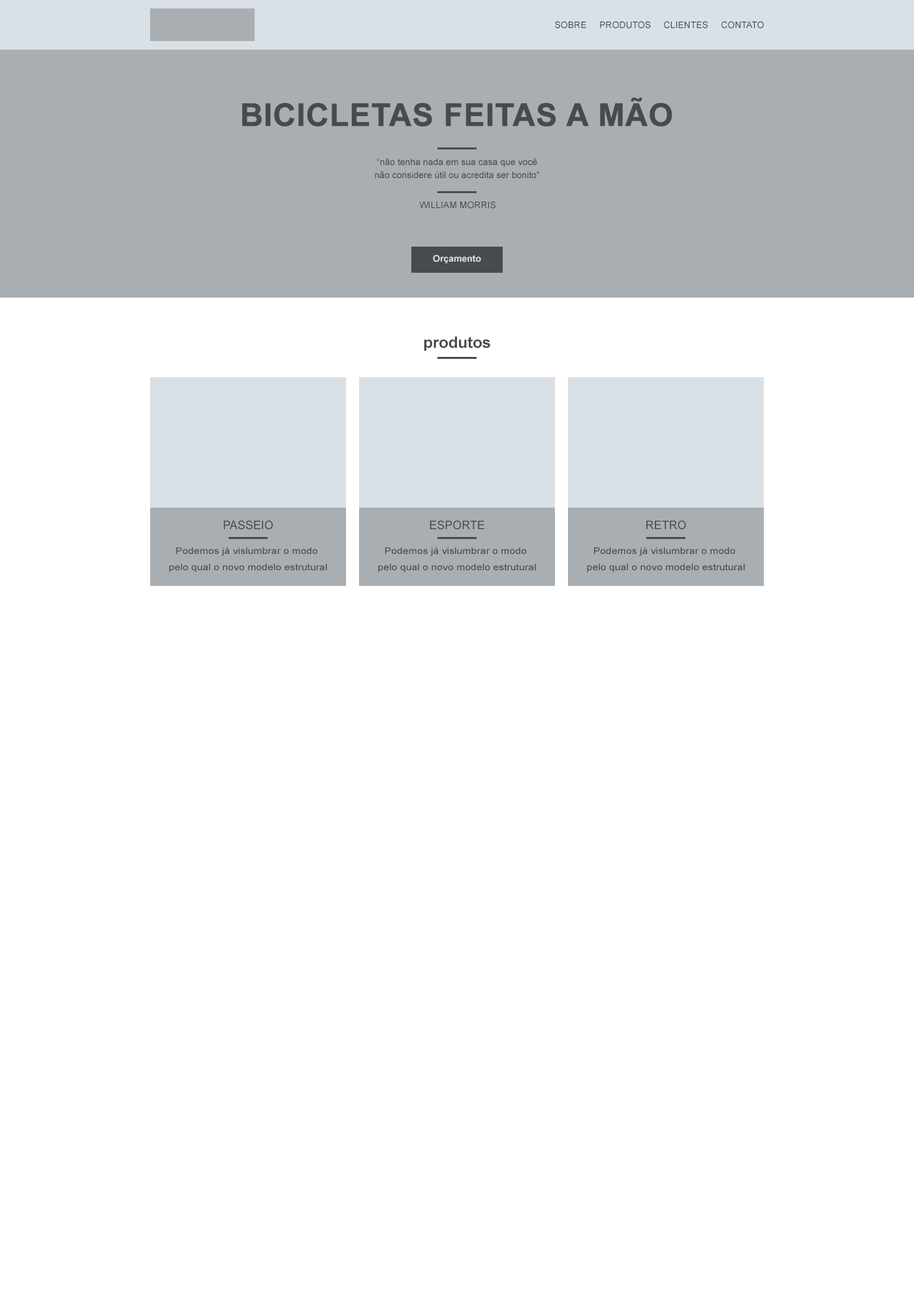
<style>
.page{position:relative;width:914px;height:1305px;background:#ffffff}
.page>*{position:absolute;margin:0}
.t1{font:9.1px "ArialMT";color:#484b4d;text-transform:uppercase}
.t2{font:31.3px "Arial-BoldMT";color:#484b4d;text-transform:uppercase;font-weight:bold}
.t3{font:9.1px/13.1px "ArialMT";color:#484b4d}
.t4{font:9.1px "Arial-BoldMT";color:#d9e0e6}
.t5{font:15.7px "Arial-BoldMT";color:#484b4d}
.t6{font:11.7px "ArialMT";color:#484b4d;text-transform:uppercase}
.t7{font:9.1px/16.3px "ArialMT";color:#484b4d;scale:1.13 1}
</style>
<div class="page">
<p class="t1" style="left:555px;top:21px;width:209px;height:8px">Sobre     Produtos     Clientes     Contato</p>
<p class="t2" style="left:242px;top:97px;width:430px;height:30px">Bicicletas feitas a mão</p>
<p class="t3" style="left:375px;top:158px;width:164px;height:20px;text-align:center">“não tenha nada em sua casa que você<br>não considere útil ou acredita ser bonito”</p>
<p class="t1" style="left:419px;top:201px;width:76px;height:8px">WILLIAM MORRIS</p>
<p class="t4" style="left:433px;top:255px;width:48px;height:9px">Orçamento</p>
<p class="t5" style="left:424px;top:336px;width:66px;height:15px">produtos</p>
<p class="t6" style="left:223px;top:520px;width:50px;height:10px">passeio</p>
<p class="t6" style="left:429px;top:520px;width:55px;height:10px">esporte</p>
<p class="t6" style="left:646px;top:520px;width:40px;height:10px">retro</p>
<p class="t7" style="left:169px;top:547px;width:158px;height:25px;text-align:center">Podemos já vislumbrar o modo <br>pelo qual o novo modelo estrutural</p>
<p class="t7" style="left:378px;top:547px;width:158px;height:25px;text-align:center">Podemos já vislumbrar o modo <br>pelo qual o novo modelo estrutural</p>
<p class="t7" style="left:587px;top:547px;width:158px;height:25px;text-align:center">Podemos já vislumbrar o modo <br>pelo qual o novo modelo estrutural</p>
</div>
